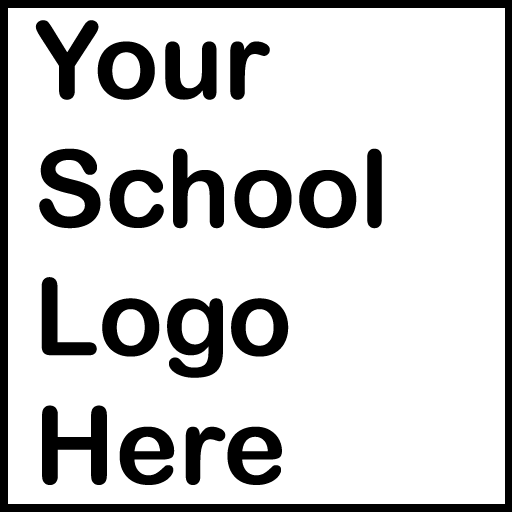
<style>
.page{position:relative;width:512px;height:512px;background:#ffffff}
.page>*{position:absolute;margin:0}
.t1{font:107px "ArialRoundedMTBold";color:#000000}
</style>
<div class="page">
<p class="t1" style="left:35px;top:20px;width:347px;height:465px">Your<br>School<br>Logo<br>Here</p>
</div>
